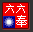
<style>
.page{position:relative;width:33px;height:32px;background:#f20000}
.page>*{position:absolute;margin:0}
.t1{font:10.4px "SimSun";color:#ffffff}
.t2{font:11.7px "SimSun";color:#ffffff}
</style>
<div class="page">
<p class="t1" style="left:5px;top:4px;width:20px;height:9px">六六</p>
<p class="t2" style="left:16px;top:15px;width:11px;height:12px">奉</p>
</div>
